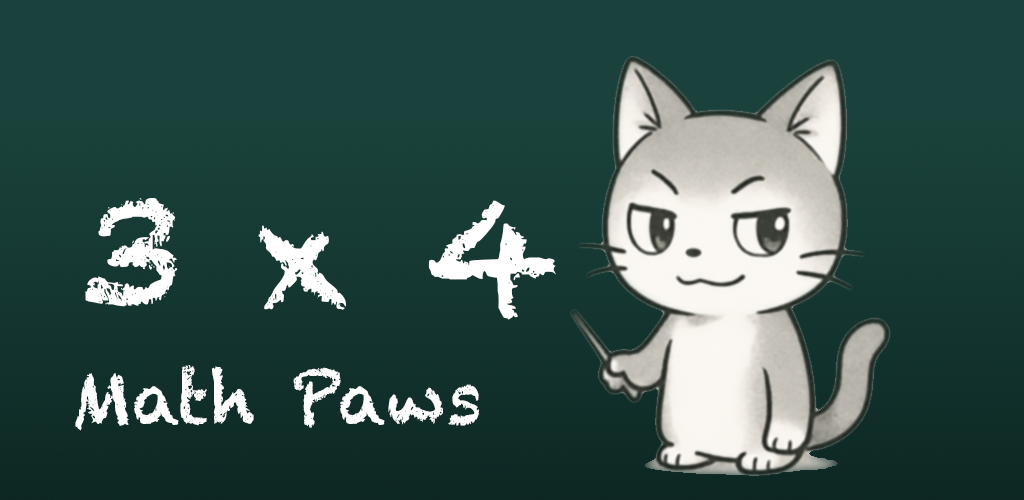
<style>
.page{position:relative;width:1024px;height:500px;background:#1a413b}
.page>*{position:absolute;margin:0}
.t1{font:150px "Chalkduster";color:#ffffff}
.t2{font:72px "Chalkduster";color:#ffffff}
</style>
<div class="page">
<p class="t1" style="left:85px;top:198px;width:471px;height:122px">3 x 4 =</p>
<p class="t2" style="left:75px;top:365px;width:404px;height:66px">Math Paws</p>
</div>
